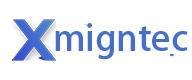
<style>
.page{position:relative;width:192px;height:80px;background:#ffffff}
.page>*{position:absolute;margin:0}
.t1{font:36px "AdobeHeitiStd-Regular";color:#446fce}
</style>
<div class="page">
<p class="t1" style="left:55px;top:23px;width:133px;height:37px">migntec</p>
</div>
